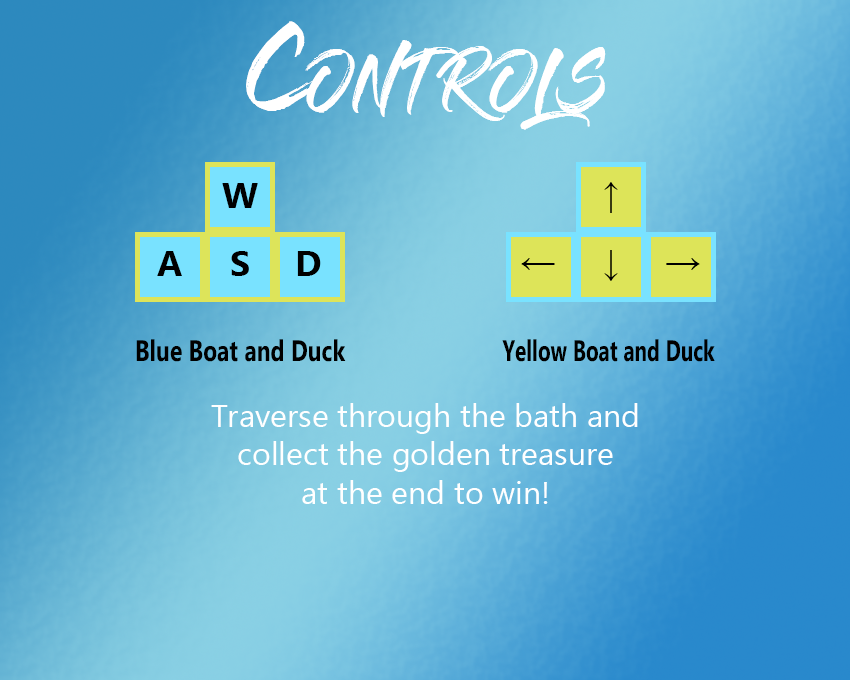
<style>
.page{position:relative;width:850px;height:680px}
.page>*{position:absolute;margin:0}
.t1{font:84.8px "GlossAndBloom";color:#ffffff;font-variant:small-caps}
.t2{font:36px "Ebrima-Bold";color:#000000;font-variant:small-caps}
.t3{font:36px "TimesNewRomanPSMT";color:#000000;font-variant:small-caps}
.t4{font:29.5px "Ebrima-Bold";color:#000000;scale:0.7 1}
.t5{font:29.5px "Ebrima-Bold";color:#000000;scale:0.77 1}
.t6{font:32px "Ebrima";color:#ffffff}
</style>
<div class="page">
<p class="t1" style="left:246px;top:21px;width:360px;height:109px">Controls</p>
<p class="t2" style="left:157px;top:183px;width:164px;height:93px;text-align:center">W<br><br>  A     S    D</p>
<p class="t3" style="left:521px;top:182px;width:179px;height:99px;text-align:center">↑<br><br> ←     ↓    →</p>
<p class="t4" style="left:136px;top:339px;width:579px;height:23px"><span class="t5">Blue Boat and Duck                         </span>Yellow Boat and Duck</p>
<p class="t6" style="left:211px;top:403px;width:427px;height:101px;text-align:center">Traverse through the bath and collect the golden treasure <br>at the end to win!</p>
</div>
